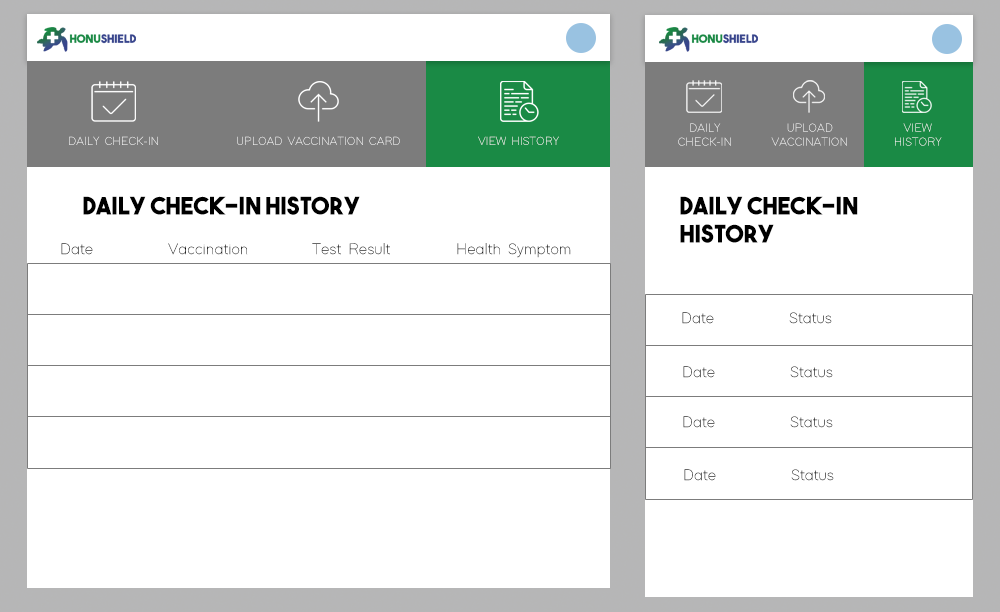
<style>
.page{position:relative;width:1000px;height:612px;background:#ffffff}
.page>*{position:absolute;margin:0}
.t1{font:12px/14px "ModernSansLight"}
.t2{font:12px "ModernSansLight"}
.t3{font:24px "TheBoldFont";color:#000000}
.t4{font:24px/14px "TheBoldFont";color:#000000}
.t5{font:16px "ModernSansLight";color:#000000}
.t6{font:16px "ModernSansLight"}
</style>
<div class="page">
<p class="t1" style="left:678px;top:123px;width:53px;height:23px;text-align:center">DAILY<br>CHECK-IN</p>
<p class="t1" style="left:771px;top:123px;width:76px;height:23px;text-align:center">UPLOAD<br>VACCINATION</p>
<p class="t1" style="left:895px;top:123px;width:47px;height:23px;text-align:center">VIEW<br>HISTORY</p>
<p class="t2" style="left:69px;top:136px;width:490px;height:9px">DAILY CHECK-IN               UPLOAD VACCINATION CARD               VIEW HISTORY</p>
<p class="t3" style="left:83px;top:196px;width:277px;height:19px">DAILY CHECK-IN HISTORY</p>
<p class="t4" style="left:680px;top:196px;width:178px;height:47px">DAILY CHECK-IN<br><br>HISTORY</p>
<p class="t5" style="left:61px;top:243px;width:510px;height:15px">Date   Vaccination  Test Result  Health Symptom</p>
<p class="t6" style="left:682px;top:312px;width:150px;height:12px">Date   Status</p>
<p class="t6" style="left:683px;top:366px;width:150px;height:12px">Date   Status</p>
<p class="t6" style="left:683px;top:416px;width:150px;height:12px">Date   Status</p>
<p class="t6" style="left:684px;top:469px;width:150px;height:12px">Date   Status</p>
</div>
